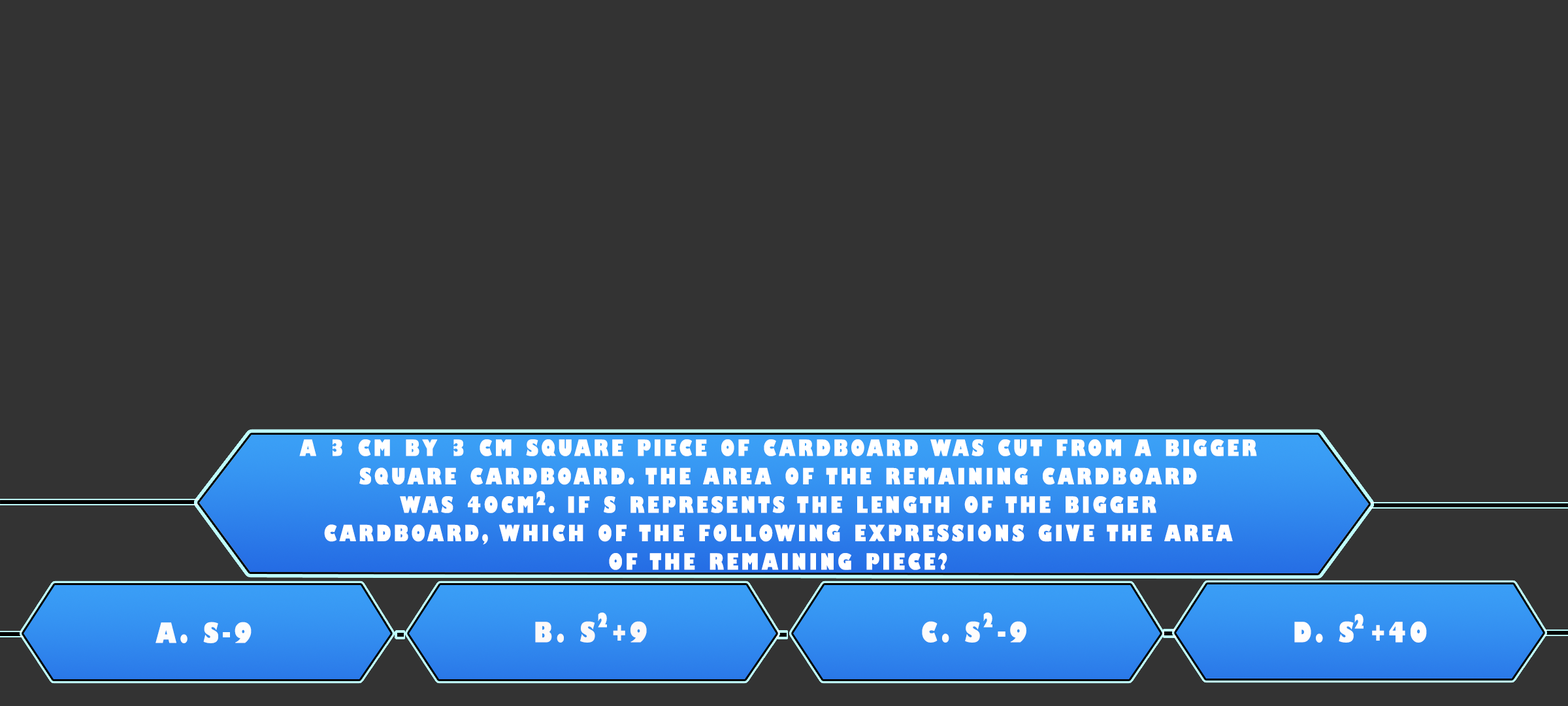
<style>
.page{position:relative;width:1568px;height:706px;background:#333333}
.page>*{position:absolute;margin:0}
.t1{font:21.8px/28.4px "GillSans-UltraBoldCondensed";letter-spacing:0.115em;color:#ffffff;text-transform:uppercase;scale:1.12 1}
.t2{font:18.4px "GillSans-UltraBoldCondensed";letter-spacing:0.115em;color:#ffffff;text-transform:uppercase;scale:1.12 1}
.t3{font:19.1px "GillSans-UltraBoldCondensed";letter-spacing:0.115em;color:#fdfdfd;text-transform:uppercase;scale:1.12 1}
.t4{font:27.2px "GillSans-UltraBoldCondensed";letter-spacing:0.115em;color:#fdfdfd;text-transform:uppercase;scale:1.12 1}
.t5{font:27.2px "GillSans-UltraBoldCondensed";letter-spacing:0.115em;color:#fcf9f9;text-transform:uppercase;scale:1.12 1}
.t6{font:27.2px "GillSans-UltraBoldCondensed";letter-spacing:0.115em;color:#fdfcfc;text-transform:uppercase;scale:1.12 1}
.t7{font:27.2px "GillSans-UltraBoldCondensed";letter-spacing:0.115em;color:#fffdfd;text-transform:uppercase;scale:1.12 1}
</style>
<div class="page">
<p class="t1" style="left:299px;top:439px;width:958px;height:131px;text-align:center">A 3 cm by 3 cm square piece of cardboard was cut from a bigger<br>square cardboard. The area of the remaining cardboard<br>was 40cm . If s represents the length of the bigger<br>cardboard, which of the following expressions give the area<br>of the remaining piece?</p>
<p class="t2" style="left:536px;top:491px;width:10px;height:14px">2</p>
<p class="t3" style="left:598px;top:612px;width:9px;height:15px">2</p>
<p class="t3" style="left:983px;top:612px;width:9px;height:15px">2</p>
<p class="t3" style="left:1354px;top:613px;width:10px;height:16px">2</p>
<p class="t4" style="left:155px;top:621px;width:97px;height:22px">A. s-9</p>
<p class="t5" style="left:535px;top:621px;width:112px;height:21px">B. s +9</p>
<p class="t6" style="left:922px;top:621px;width:104px;height:21px">C. s -9</p>
<p class="t7" style="left:1294px;top:621px;width:133px;height:21px">D. s +40</p>
</div>
